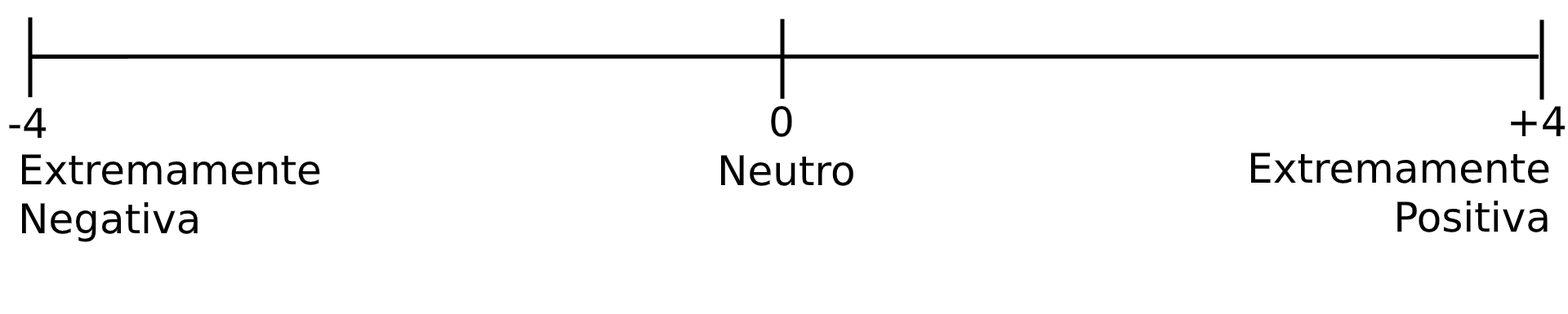
<style>
.page{position:relative;width:1568px;height:314px;background:#ffffff}
.page>*{position:absolute;margin:0}
.t1{font:40.8px "DejaVuSans";color:#000000}
</style>
<div class="page">
<p class="t1" style="left:9px;top:108px;width:38px;height:30px">-4</p>
<p class="t1" style="left:771px;top:105px;width:21px;height:32px">0</p>
<p class="t1" style="left:1511px;top:106px;width:54px;height:30px">+4</p>
<p class="t1" style="left:21px;top:154px;width:299px;height:89px">Extremamente<br>Negativa</p>
<p class="t1" style="left:720px;top:155px;width:133px;height:31px">Neutro</p>
<p class="t1" style="left:1251px;top:153px;width:298px;height:80px;text-align:right">Extremamente<br>Positiva</p>
</div>
